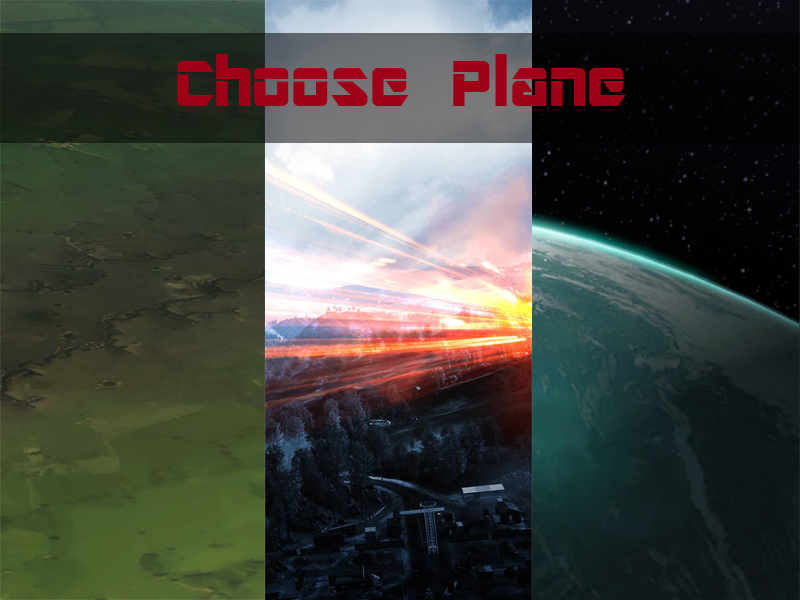
<style>
.page{position:relative;width:800px;height:600px}
.page>*{position:absolute;margin:0}
.t1{font:72px "ARDESTINE";color:#9f0017}
</style>
<div class="page">
<p class="t1" style="left:177px;top:54px;width:449px;height:52px">Choose Plane</p>
</div>
